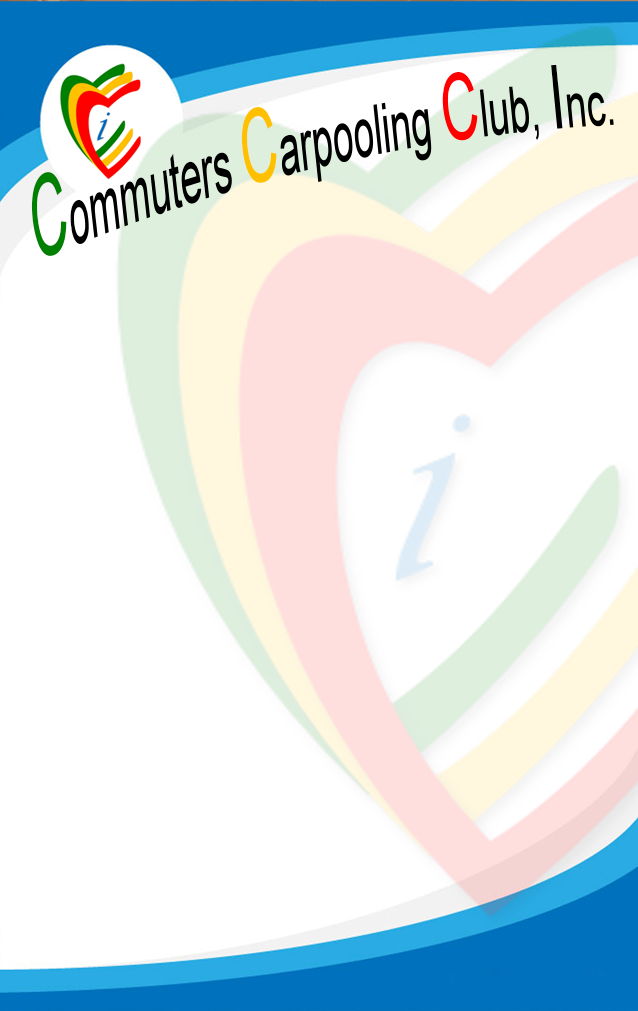
<style>
.page{position:relative;width:638px;height:1011px;background:#ffffff}
.page>*{position:absolute;margin:0}
.t1{font:71.1px "ArialMT";color:#000000;scale:0.53 1}
.t2{font:100px "ArialMT";color:#008000;scale:0.53 1}
.t3{font:100px "ArialMT";color:#ffc000;scale:0.53 1}
.t4{font:100px "ArialMT";color:#ff0000;scale:0.53 1}
.t5{font:100px "ArialMT";color:#000000;scale:0.53 1}
</style>
<div class="page">
<p class="t1" style="left:31px;top:64px;width:583px;height:192px;rotate:-13deg"><span class="t2">C</span>ommuters <span class="t3">C</span>arpooling <span class="t4">C</span>lub, <span class="t5">I</span>nc.</p>
</div>
